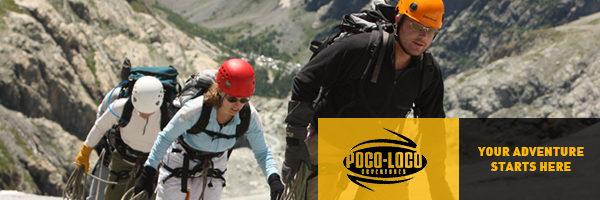
<style>
.page{position:relative;width:600px;height:200px}
.page>*{position:absolute;margin:0}
.t1{font:12.5px "DINAlternate-Black";color:#fbb809;text-transform:uppercase}
</style>
<div class="page">
<p class="t1" style="left:478px;top:147px;width:106px;height:24px;text-align:center">your adventure<br>starts here</p>
</div>
